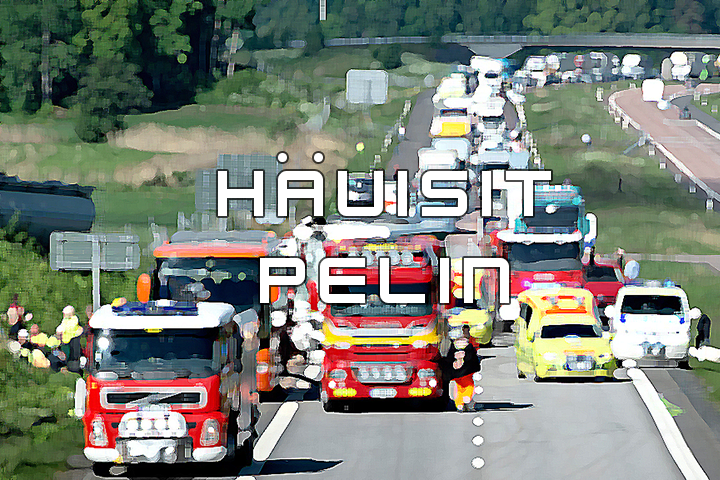
<style>
.page{position:relative;width:720px;height:480px}
.page>*{position:absolute;margin:0}
.t1{font:72px "KenVector-Future";color:#ffffff}
</style>
<div class="page">
<p class="t1" style="left:218px;top:153px;width:333px;height:150px;text-align:center">HÄVISIT PELIN</p>
</div>
